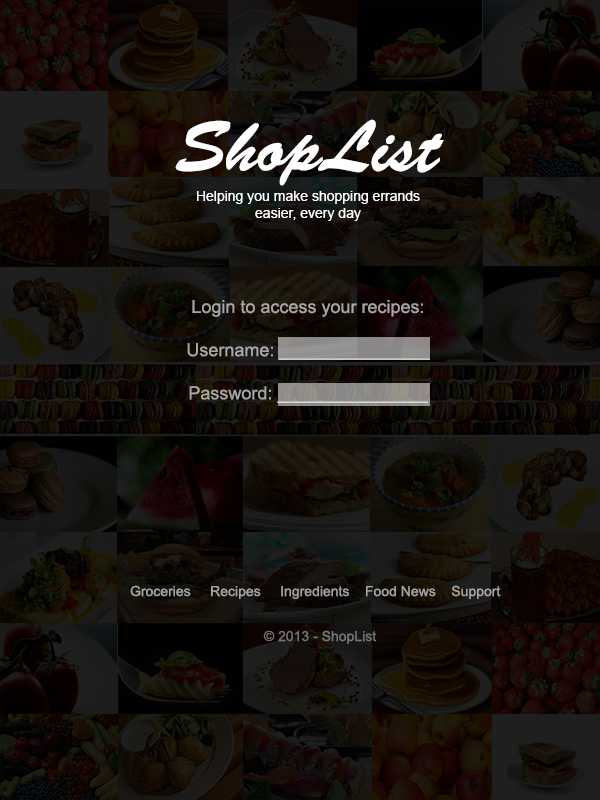
<style>
.page{position:relative;width:600px;height:800px}
.page>*{position:absolute;margin:0}
.t1{font:72px "BrushScriptStd";color:#ffffff}
.t2{font:14px "ArialMT";color:#ffffff}
.t3{font:18px "ArialMT";color:#a7a6a5}
.t4{font:14px "ArialMT";color:#a4a4a3}
.t5{font:14px "ArialMT";color:#757575}
</style>
<div class="page">
<p class="t1" style="left:175px;top:119px;width:269px;height:67px">ShopList</p>
<p class="t2" style="left:197px;top:191px;width:223px;height:30px;text-align:center">Helping you make shopping errands <br>easier, every day</p>
<p class="t3" style="left:187px;top:300px;width:243px;height:103px;text-align:center">Login to access your recipes:<br><br>Username: _______________<br><br>Password: _______________</p>
<p class="t4" style="left:130px;top:585px;width:371px;height:14px">Groceries     Recipes     Ingredients    Food News    Support</p>
<p class="t5" style="left:263px;top:630px;width:114px;height:14px">© 2013 - ShopList</p>
</div>
